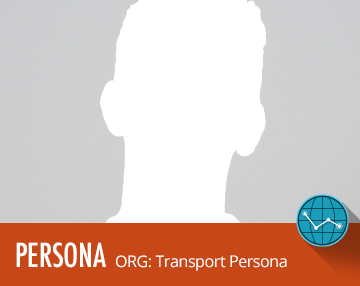
<style>
.page{position:relative;width:360px;height:286px;background:#ffffff}
.page>*{position:absolute;margin:0}
.t1{font:32px "Futura-CondensedMedium";letter-spacing:-0.01em;color:#ffffff}
.t2{font:16px "OpenSans";letter-spacing:-0.025em;color:#ffffff}
</style>
<div class="page">
<p class="t1" style="left:16px;top:242px;width:90px;height:26px">PERSONA</p>
<p class="t2" style="left:116px;top:255px;width:171px;height:16px">ORG: Transport Persona</p>
</div>
